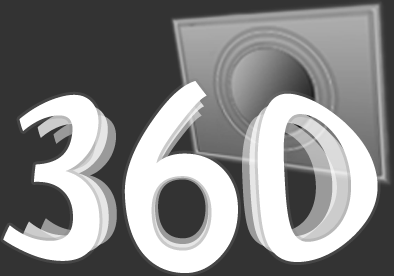
<style>
.page{position:relative;width:394px;height:276px;background:#333333}
.page>*{position:absolute;margin:0}
.t1{font:186.1px "TrebuchetMS";color:#ffffff}
.t2{font:165.4px "TrebuchetMS";color:#ffffff}
.t3{font:147.2px "TrebuchetMS"}
</style>
<div class="page">
<p class="t1" style="left:3px;top:81px;width:375px;height:192px">360</p>
<p class="t2" style="left:23px;top:93px;width:333px;height:171px;opacity:0.75">360</p>
<p class="t3" style="left:40px;top:104px;width:297px;height:153px">360</p>
</div>
